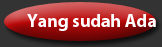
<style>
.page{position:relative;width:162px;height:47px;background:#333333}
.page>*{position:absolute;margin:0}
.t1{font:18px "MyriadPro-Bold";color:#ffffff}
</style>
<div class="page">
<p class="t1" style="left:27px;top:14px;width:129px;height:17px">Yang sudah Ada</p>
</div>
